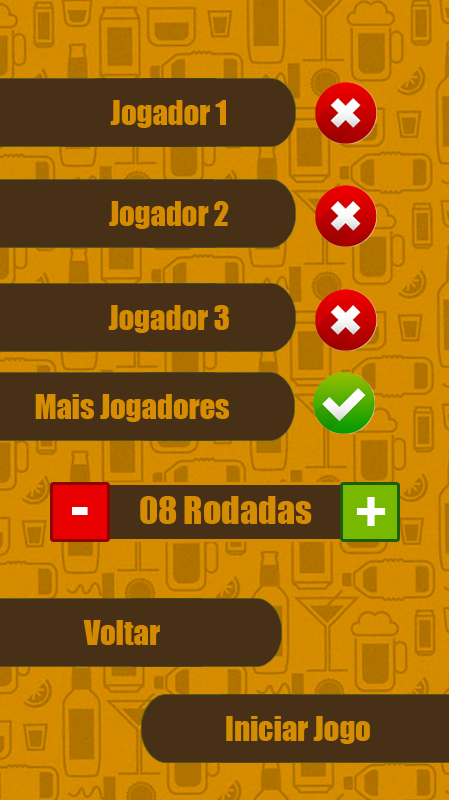
<style>
.page{position:relative;width:449px;height:800px;background:#473015}
.page>*{position:absolute;margin:0}
.t1{font:30.6px "Impact";color:#d68d00}
.t2{font:30.6px "Impact";color:#d58b00}
.t3{font:30.6px "Impact";color:#d58d00}
.t4{font:36px "Impact";color:#d58c00}
.t5{font:60px "Impact";color:#ffffff}
.t6{font:30.6px "Impact";color:#d48d00}
</style>
<div class="page">
<p class="t1" style="left:110px;top:100px;width:116px;height:28px">Jogador 1</p>
<p class="t2" style="left:109px;top:201px;width:120px;height:28px">Jogador 2</p>
<p class="t2" style="left:108px;top:305px;width:121px;height:28px">Jogador 3</p>
<p class="t3" style="left:35px;top:394px;width:194px;height:28px">Mais Jogadores</p>
<p class="t4" style="left:140px;top:496px;width:172px;height:28px">08 Rodadas</p>
<p class="t5" style="left:356px;top:497px;width:30px;height:29px">+</p>
<p class="t5" style="left:72px;top:507px;width:16px;height:8px">-</p>
<p class="t2" style="left:83px;top:620px;width:77px;height:25px">Voltar</p>
<p class="t6" style="left:226px;top:716px;width:144px;height:28px">Iniciar Jogo</p>
</div>
